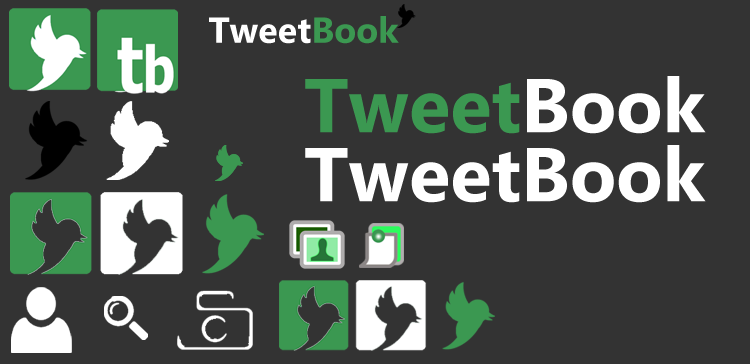
<style>
.page{position:relative;width:750px;height:364px;background:#333333}
.page>*{position:absolute;margin:0}
.t1{font:36px "MyanmarText-Bold";color:#ffffff}
.t2{font:36px "MyanmarText-Bold";color:#3b9851}
.t3{font:76px "MyanmarText-Bold";color:#3b9851}
.t4{font:76px "MyanmarText-Bold";color:#ffffff}
</style>
<div class="page">
<p class="t1" style="left:209px;top:16px;width:190px;height:28px">Tweet<span class="t2">Book</span></p>
<p class="t3" style="left:305px;top:76px;width:401px;height:58px">Tweet<span class="t4">Book</span></p>
<p class="t4" style="left:305px;top:145px;width:401px;height:58px">TweetBook</p>
</div>
